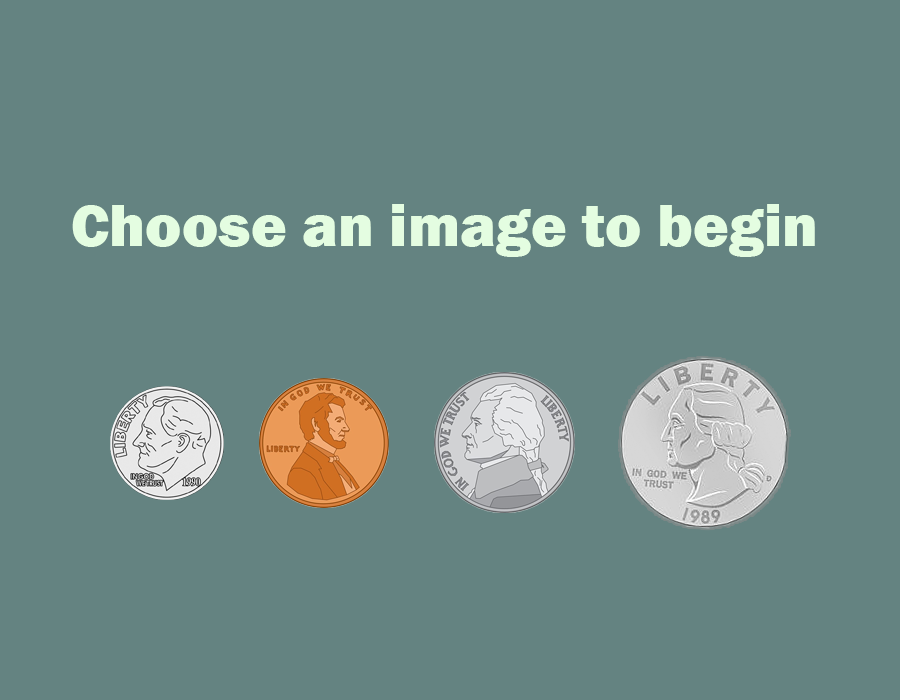
<style>
.page{position:relative;width:900px;height:700px;background:#648381}
.page>*{position:absolute;margin:0}
.t1{font:14.7px "FranklinGothic-Heavy";color:#e4fde1}
</style>
<div class="page">
<p class="t1" style="left:72px;top:204px;width:743px;height:53px">Choose an image to begin</p>
</div>
